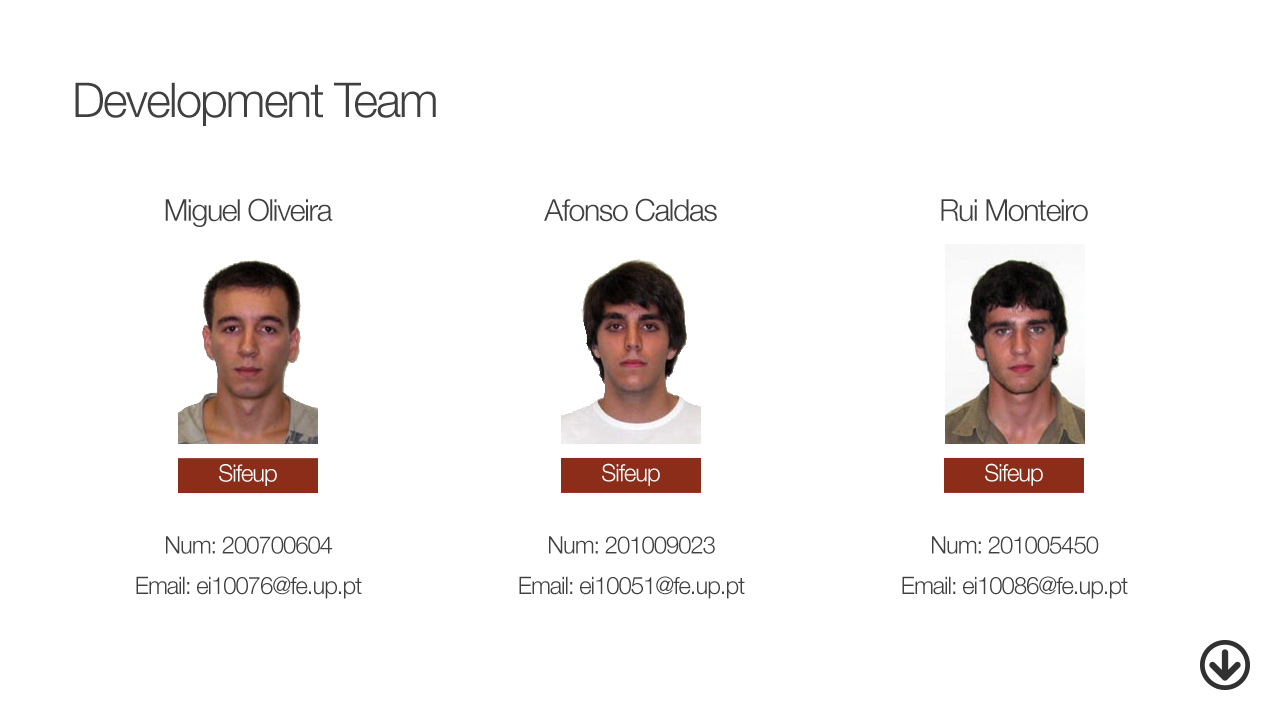
<style>
.page{position:relative;width:1280px;height:720px;background:#ffffff}
.page>*{position:absolute;margin:0}
.t1{font:48px "HelveticaNeue-Light";letter-spacing:-0.04em;color:#404040}
.t2{font:30.3px "HelveticaNeue-Light";letter-spacing:-0.04em;color:#404040}
.t3{font:23.9px "HelveticaNeue-Light";letter-spacing:-0.04em;color:#ffffff}
.t4{font:24px/20.3px "HelveticaNeue-Light";letter-spacing:-0.04em;color:#404040}
</style>
<div class="page">
<p class="t1" style="left:75px;top:82px;width:361px;height:44px">Development Team</p>
<p class="t2" style="left:165px;top:198px;width:168px;height:29px">Miguel Oliveira</p>
<p class="t2" style="left:544px;top:198px;width:173px;height:24px">Afonso Caldas</p>
<p class="t2" style="left:941px;top:199px;width:147px;height:23px">Rui Monteiro</p>
<p class="t3" style="left:219px;top:464px;width:58px;height:22px">Sifeup</p>
<p class="t3" style="left:602px;top:463px;width:58px;height:23px">Sifeup</p>
<p class="t3" style="left:985px;top:463px;width:58px;height:23px">Sifeup</p>
<p class="t4" style="left:136px;top:536px;width:226px;height:63px;text-align:center">Num: 200700604<br><br>Email: ei10076@fe.up.pt</p>
<p class="t4" style="left:519px;top:536px;width:226px;height:63px;text-align:center">Num: 201009023<br><br>Email: ei10051@fe.up.pt</p>
<p class="t4" style="left:902px;top:536px;width:226px;height:63px;text-align:center">Num: 201005450<br><br>Email: ei10086@fe.up.pt</p>
</div>
